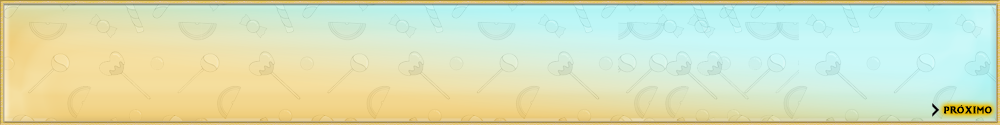
<style>
.page{position:relative;width:1000px;height:125px}
.page>*{position:absolute;margin:0}
.t1{font:10px "Icekingdom-Bold";letter-spacing:0.1em;color:#000000}
</style>
<div class="page">
<p class="t1" style="left:943px;top:105px;width:49px;height:9px">PRÓXIMO</p>
</div>
